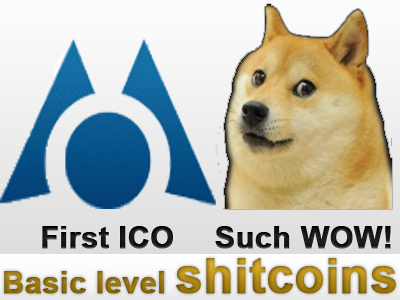
<style>
.page{position:relative;width:400px;height:300px}
.page>*{position:absolute;margin:0}
.t1{font:30px "Arial-BoldMT";color:#151515;font-weight:bold}
.t2{font:30px "Arial-BoldMT";color:#171717;font-weight:bold}
.t3{font:30px "Arial-BoldMT";font-weight:bold}
.t4{font:48px "Arial-BoldMT";font-weight:bold}
</style>
<div class="page">
<p class="t1" style="left:42px;top:226px;width:131px;height:23px">First ICO</p>
<p class="t2" style="left:215px;top:226px;width:176px;height:23px">Such WOW!</p>
<p class="t3" style="left:4px;top:258px;width:392px;height:36px">Basic level <span class="t4">shitcoins</span></p>
</div>
